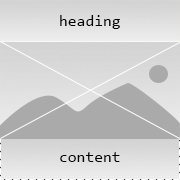
<style>
.page{position:relative;width:180px;height:180px}
.page>*{position:absolute;margin:0}
.t1{font:16px "Consolas";color:#000000}
</style>
<div class="page">
<p class="t1" style="left:60px;top:15px;width:60px;height:14px">heading</p>
<p class="t1" style="left:60px;top:152px;width:60px;height:10px">content</p>
</div>
